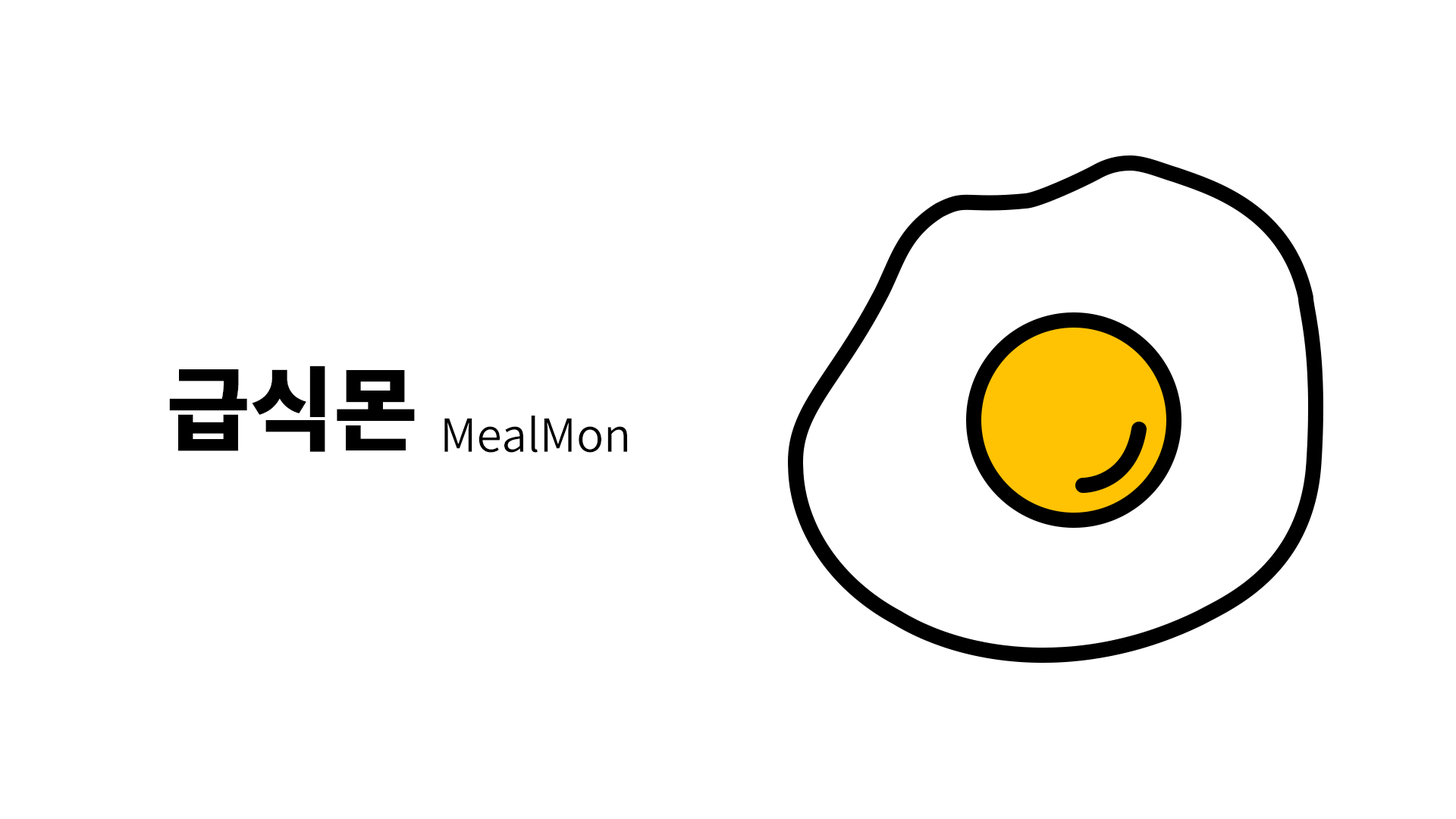
<style>
.page{position:relative;width:1456px;height:819px;background:#ffffff}
.page>*{position:absolute;margin:0}
.t1{font:91px "NotoSansCJKkr-Black";color:#000000}
.t2{font:45.5px "NotoSansCJKkr-DemiLight";color:#000000}
</style>
<div class="page">
<p class="t1" style="left:169px;top:366px;width:246px;height:86px">급식몬</p>
<p class="t2" style="left:444px;top:416px;width:183px;height:37px">MealMon</p>
</div>
